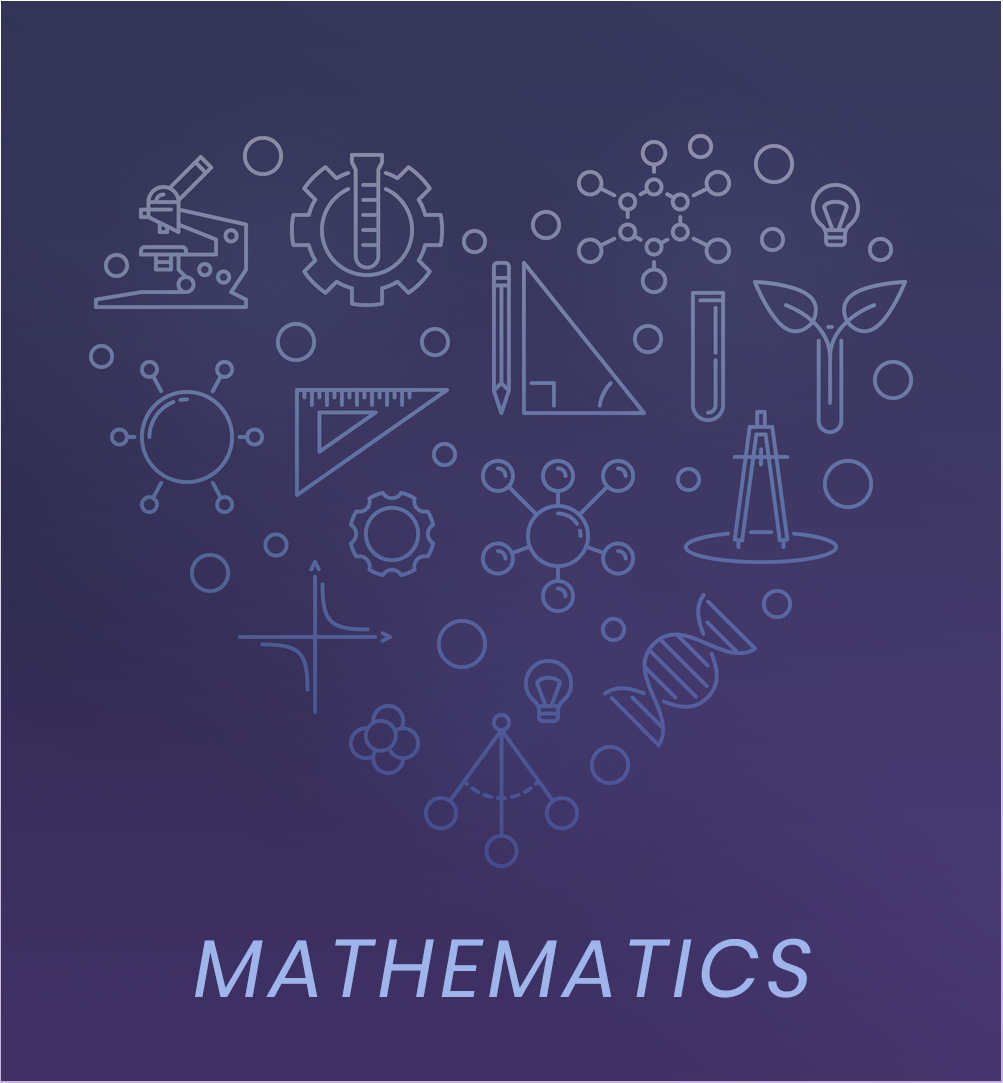
<style>
.page{position:relative;width:1003px;height:1083px}
.page>*{position:absolute;margin:0}
.t1{font:140px "Poppins-Regular";letter-spacing:0.075em;color:#9eb5eb;font-style:italic}
</style>
<div class="page">
<p class="t1" style="left:195px;top:938px;width:616px;height:60px">MATHEMATICS</p>
</div>
